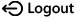
<style>
.page{position:relative;width:76px;height:18px;background:#ffffff}
.page>*{position:absolute;margin:0}
.t1{font:14.5px "YuGothicUI-Semibold";color:#000000}
</style>
<div class="page">
<p class="t1" style="left:28px;top:2px;width:46px;height:15px">Logout</p>
</div>
